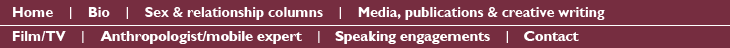
<style>
.page{position:relative;width:730px;height:48px;background:#762d40}
.page>*{position:absolute;margin:0}
.t1{font:14px/24px "GillSans-Bold";color:#ffffff}
.t2{font:18px/24px "GillSansLight-Regular";color:#ffffff}
.t3{font:15px/24px "GillSans-Bold";letter-spacing:-0.02em;color:#ffffff}
</style>
<div class="page">
<p class="t1" style="left:12px;top:7px;width:593px;height:37px">Home    <span class="t2">I</span>    Bio    <span class="t2">I</span>    Sex &amp; relationship columns    <span class="t2">I</span>    Media, publications &amp; creative writing <br>Film/TV    <span class="t2">I    </span><span class="t3">Anthropologist/mobile expert    </span><span class="t2">I    </span><span class="t3">Speaking engagements    </span><span class="t2">I    </span><span class="t3">Contact</span></p>
</div>
